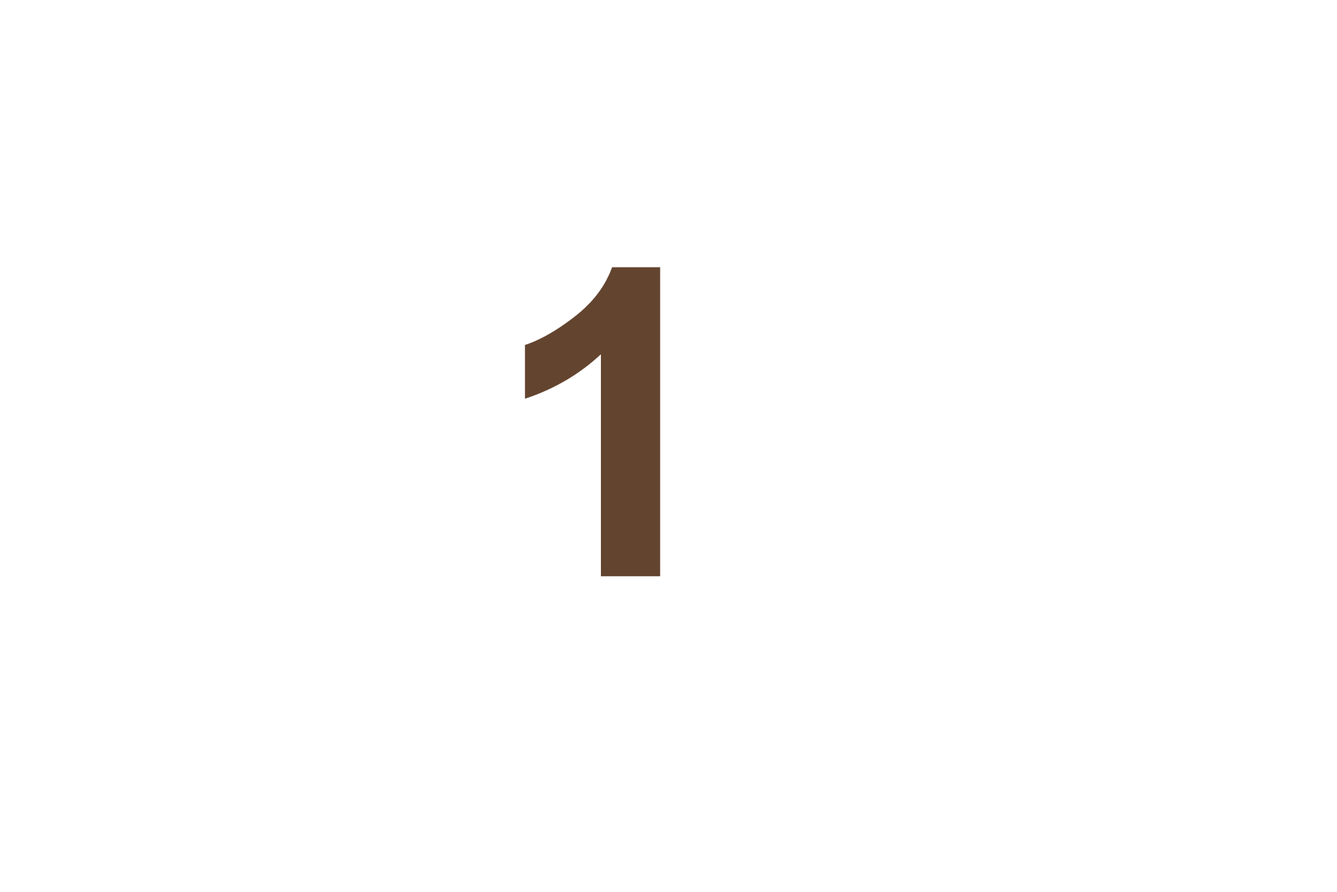
<style>
.page{position:relative;width:1337px;height:892px;background:#ffffff}
.page>*{position:absolute;margin:0}
.t1{font:429.6px "Arial-BoldMT";color:#63442f}
</style>
<div class="page">
<p class="t1" style="left:525px;top:267px;width:136px;height:310px">1</p>
</div>
